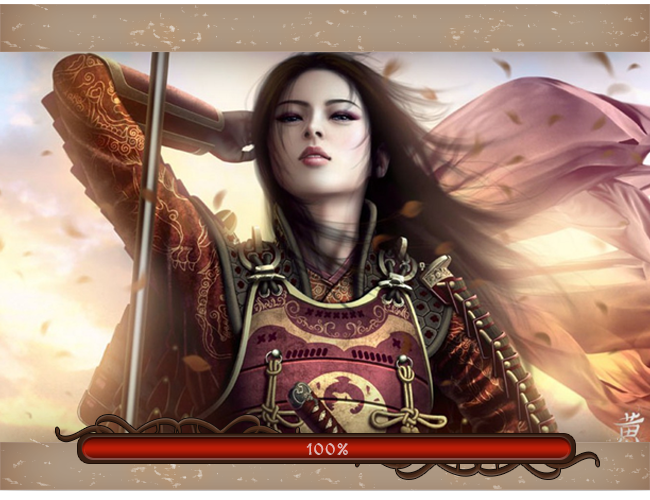
<style>
.page{position:relative;width:650px;height:500px}
.page>*{position:absolute;margin:0}
.t1{font:16px "MedievalSharp";letter-spacing:0.06em;color:#deb7b5;text-transform:uppercase}
</style>
<div class="page">
<p class="t1" style="left:306px;top:443px;width:42px;height:12px">100%</p>
</div>
